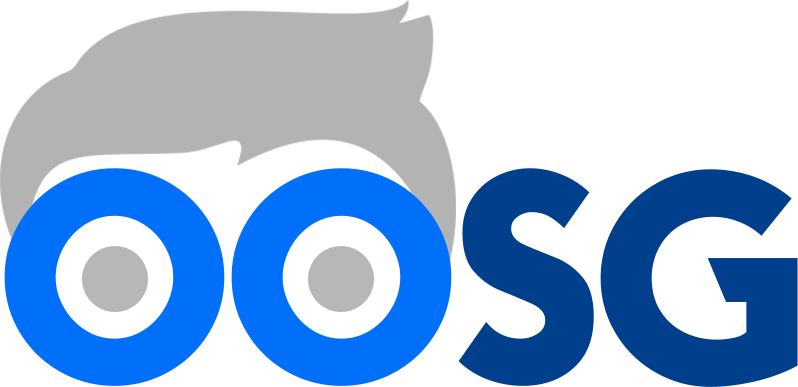
<style>
.page{position:relative;width:798px;height:387px;background:#ffffff}
.page>*{position:absolute;margin:0}
.t1{font:300px "Mouser";color:#006ff9}
.t2{font:300px "Mouser";color:#003f8c}
</style>
<div class="page">
<p class="t1" style="left:4px;top:168px;width:794px;height:219px">OO<span class="t2">SG</span></p>
</div>
